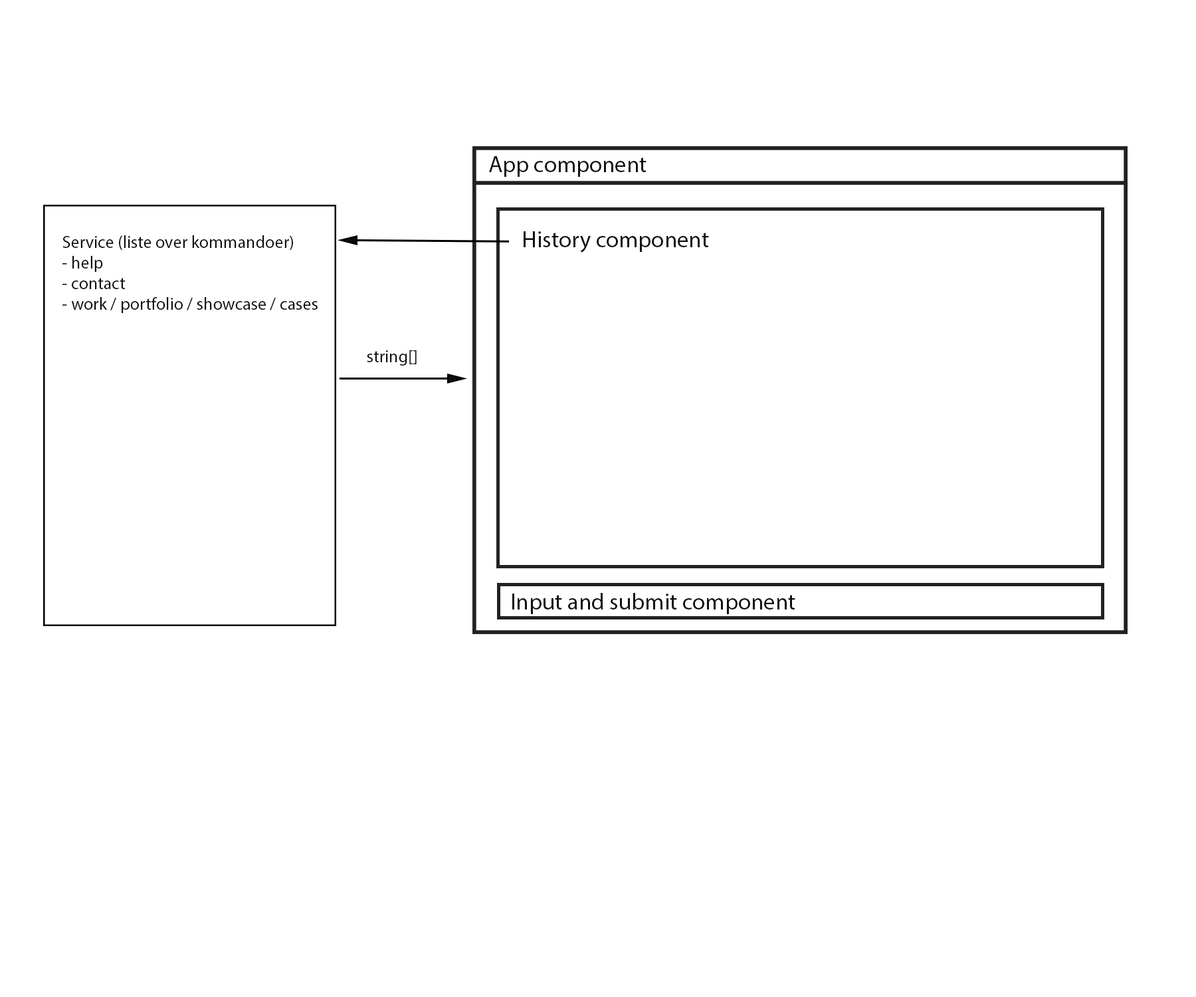
<style>
.page{position:relative;width:1196px;height:997px;background:#ffffff}
.page>*{position:absolute;margin:0}
.t1{font:23.3px "MyriadPro-Regular";color:#0e0e0e}
.t2{font:17.3px "MyriadPro-Regular";color:#0e0e0e}
</style>
<div class="page">
<p class="t1" style="left:489px;top:156px;width:158px;height:21px">App component</p>
<p class="t1" style="left:524px;top:231px;width:185px;height:22px">History component</p>
<p class="t2" style="left:62px;top:235px;width:256px;height:78px">Service (liste over kommandoer)<br>- help<br>- contact<br>- work / portfolio / showcase / cases</p>
<p class="t2" style="left:367px;top:350px;width:50px;height:16px">string[]</p>
<p class="t1" style="left:512px;top:593px;width:283px;height:21px">Input and submit component</p>
</div>
